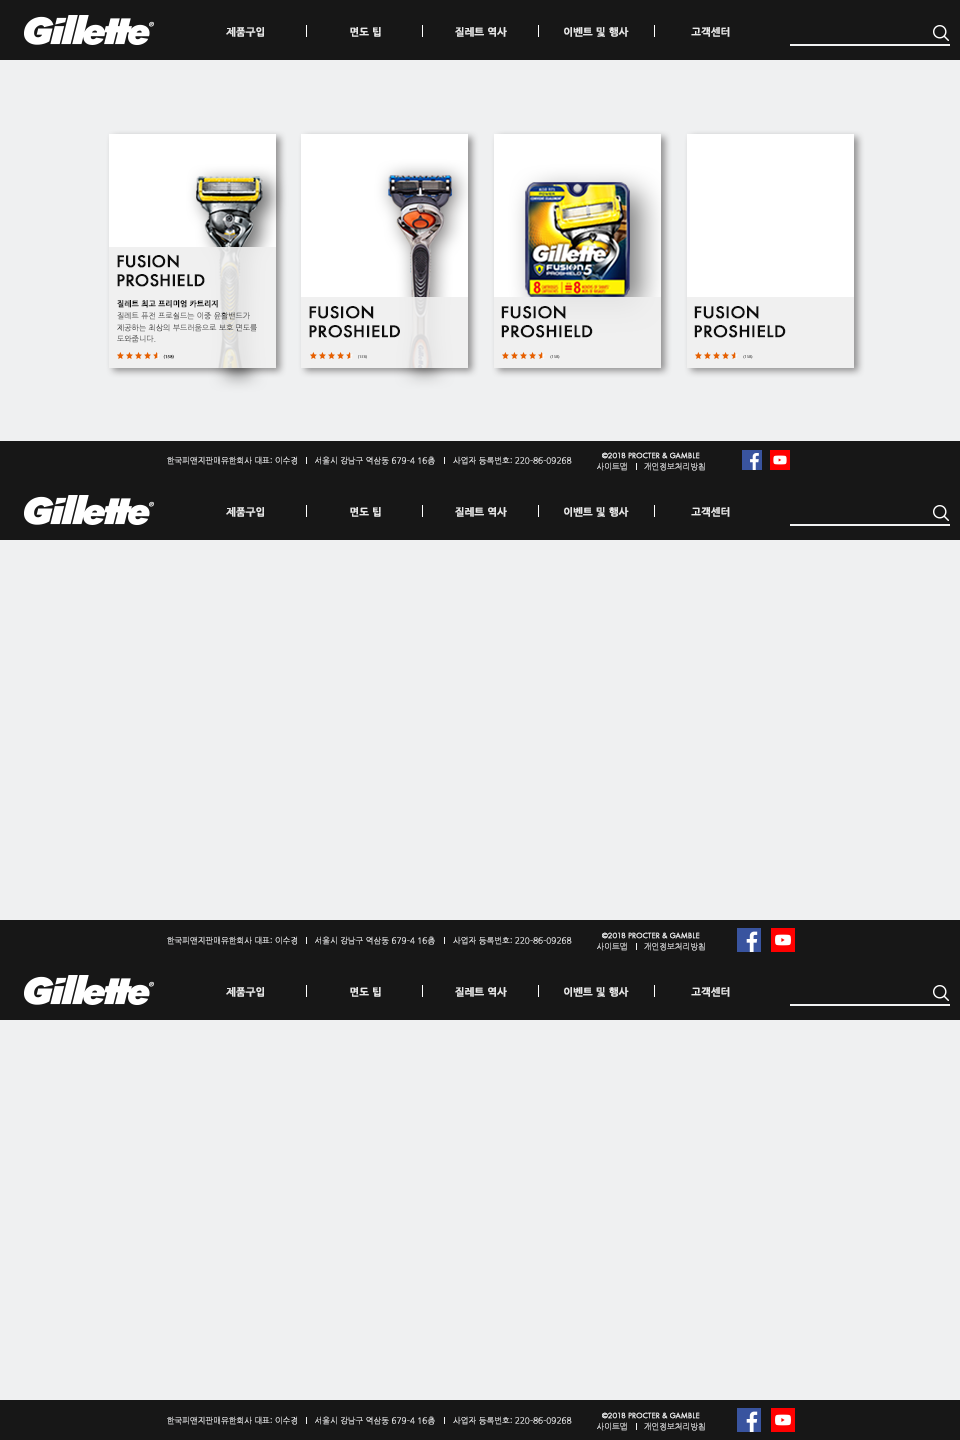
<style>
.page{position:relative;width:960px;height:1440px;background:#eff0f1}
.page>*{position:absolute;margin:0}
.t1{font:10px "NanumGothicBold";color:#e6e6e6;font-weight:bold}
.t2{font:17.7px/18.9px "FuturaTEE-Medi";color:#0e0e0e;font-weight:bold}
.t3{font:7.5px/11.7px "NanumGothicLight";color:#0e0e0e;font-weight:bold}
.t4{font:7.5px/11.7px "NanumGothicBold";color:#0e0e0e;font-weight:bold}
.t5{font:17.7px/18.9px "FuturaTEE-Medi";color:#0e0e0e;font-weight:bold;scale:1.06 1}
.t6{font:4.5px "MyriadPro-Regular";letter-spacing:0.01em;font-weight:bold}
.t7{font:4px "MyriadPro-Regular";letter-spacing:0.01em;font-weight:bold}
.t8{font:8px "NanumGothicLight";font-weight:bold}
.t9{font:8px "NanumGothicLight";color:#f0f1f2;font-weight:bold}
.t10{font:8px "FuturaTEE-Book";color:#f0f1f2;font-weight:bold}
</style>
<div class="page">
<p class="t1" style="left:226px;top:27px;width:38px;height:10px">제품구입</p>
<p class="t1" style="left:350px;top:27px;width:31px;height:10px">면도 팁</p>
<p class="t1" style="left:455px;top:27px;width:52px;height:10px">질레트 역사</p>
<p class="t1" style="left:564px;top:27px;width:65px;height:10px">이벤트 및 행사</p>
<p class="t1" style="left:691px;top:27px;width:39px;height:10px">고객센터</p>
<p class="t2" style="left:117px;top:254px;width:88px;height:33px">FUSION <br>PROSHIELD</p>
<p class="t3" style="left:117px;top:300px;width:140px;height:43px"><span class="t4">질레트 최고 프리미엄 카트리지 <br></span>질레트 퓨전 프로쉴드는 이중 윤활밴드가 <br>제공하는 최상의 부드러움으로 보호 면도를<br>도와줍니다.</p>
<p class="t5" style="left:309px;top:305px;width:91px;height:33px">FUSION <br>PROSHIELD</p>
<p class="t5" style="left:501px;top:305px;width:92px;height:33px">FUSION <br>PROSHIELD</p>
<p class="t5" style="left:694px;top:305px;width:92px;height:33px">FUSION <br>PROSHIELD</p>
<p class="t6" style="left:163px;top:354px;width:11px;height:5px">(158)</p>
<p class="t7" style="left:358px;top:355px;width:9px;height:4px">(158)</p>
<p class="t7" style="left:550px;top:355px;width:10px;height:4px">(158)</p>
<p class="t7" style="left:743px;top:355px;width:10px;height:4px">(158)</p>
<p class="t8" style="left:167px;top:456px;width:130px;height:9px">한국피앤지판매유한회사 대표: 이수경</p>
<p class="t9" style="left:315px;top:456px;width:120px;height:9px">서울시 강남구 역삼동 679-4 16층</p>
<p class="t9" style="left:453px;top:456px;width:119px;height:9px">사업자 등록번호: 220-86-09268</p>
<p class="t8" style="left:597px;top:462px;width:30px;height:9px">사이트맵</p>
<p class="t10" style="left:602px;top:452px;width:98px;height:7px">©2018 PROCTER &amp; GAMBLE</p>
<p class="t9" style="left:644px;top:462px;width:61px;height:9px">개인정보처리방침</p>
<p class="t1" style="left:226px;top:507px;width:38px;height:10px">제품구입</p>
<p class="t1" style="left:350px;top:507px;width:31px;height:10px">면도 팁</p>
<p class="t1" style="left:455px;top:507px;width:52px;height:10px">질레트 역사</p>
<p class="t1" style="left:564px;top:507px;width:65px;height:10px">이벤트 및 행사</p>
<p class="t1" style="left:691px;top:507px;width:39px;height:10px">고객센터</p>
<p class="t8" style="left:167px;top:936px;width:130px;height:9px">한국피앤지판매유한회사 대표: 이수경</p>
<p class="t9" style="left:315px;top:936px;width:120px;height:9px">서울시 강남구 역삼동 679-4 16층</p>
<p class="t9" style="left:453px;top:936px;width:119px;height:9px">사업자 등록번호: 220-86-09268</p>
<p class="t8" style="left:597px;top:942px;width:30px;height:9px">사이트맵</p>
<p class="t10" style="left:602px;top:932px;width:98px;height:7px">©2018 PROCTER &amp; GAMBLE</p>
<p class="t9" style="left:644px;top:942px;width:61px;height:9px">개인정보처리방침</p>
<p class="t1" style="left:226px;top:987px;width:38px;height:10px">제품구입</p>
<p class="t1" style="left:350px;top:987px;width:31px;height:10px">면도 팁</p>
<p class="t1" style="left:455px;top:987px;width:52px;height:10px">질레트 역사</p>
<p class="t1" style="left:564px;top:987px;width:65px;height:10px">이벤트 및 행사</p>
<p class="t1" style="left:691px;top:987px;width:39px;height:10px">고객센터</p>
<p class="t8" style="left:167px;top:1416px;width:130px;height:9px">한국피앤지판매유한회사 대표: 이수경</p>
<p class="t9" style="left:315px;top:1416px;width:120px;height:9px">서울시 강남구 역삼동 679-4 16층</p>
<p class="t9" style="left:453px;top:1416px;width:119px;height:9px">사업자 등록번호: 220-86-09268</p>
<p class="t8" style="left:597px;top:1422px;width:30px;height:9px">사이트맵</p>
<p class="t10" style="left:602px;top:1412px;width:98px;height:7px">©2018 PROCTER &amp; GAMBLE</p>
<p class="t9" style="left:644px;top:1422px;width:61px;height:9px">개인정보처리방침</p>
</div>
